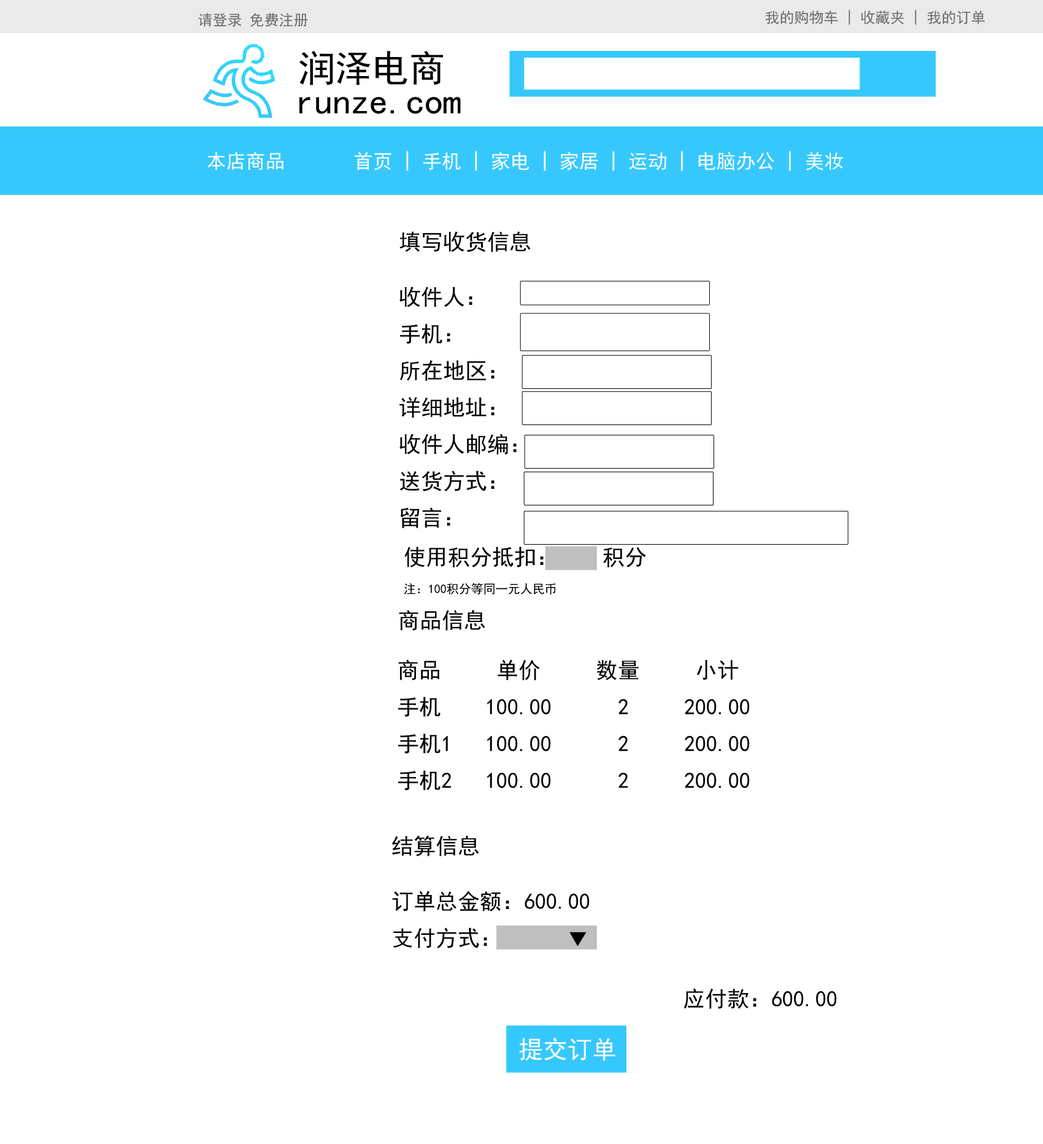
<style>
.page{position:relative;width:1043px;height:1144px;background:#ffffff}
.page>*{position:absolute;margin:0}
.t1{font:14.7px "SimHei";color:#6f6f6f}
.t2{font:36.8px "SimHei";color:#010101}
.t3{font:19.6px "SimHei";color:#ffffff}
.t4{font:22.1px/18.4px "SimHei";color:#000000}
.t5{font:12.3px/18.4px "SimHei";color:#000000}
.t6{font:22.1px "SimHei";color:#000000}
.t7{font:24.5px "SimHei";color:#ffffff}
</style>
<div class="page">
<p class="t1" style="left:198px;top:13px;width:110px;height:14px">请登录 免费注册</p>
<p class="t1" style="left:765px;top:10px;width:220px;height:15px">我的购物车 | 收藏夹 | 我的订单</p>
<p class="t2" style="left:299px;top:51px;width:144px;height:34px">润泽电商</p>
<p class="t2" style="left:299px;top:97px;width:162px;height:17px">runze.com</p>
<p class="t3" style="left:207px;top:151px;width:636px;height:20px">本店商品       首页 | 手机 | 家电 | 家居 | 运动 | 电脑办公 | 美妆</p>
<p class="t4" style="left:399px;top:231px;width:131px;height:297px">填写收货信息<br><br><br>收件人：<br><br>手机：<br><br>所在地区：<br><br>详细地址：<br><br>收件人邮编：<br><br>送货方式：<br><br>留言：</p>
<p class="t5" style="left:404px;top:546px;width:242px;height:48px"><span class="t4">使用积分抵扣：    积分<br><br></span>注：100积分等同一元人民币</p>
<p class="t6" style="left:399px;top:610px;width:86px;height:20px">商品信息</p>
<p class="t4" style="left:398px;top:659px;width:351px;height:132px">商品     单价     数量     小计 <br><br>手机    100.00      2     200.00<br><br>手机1   100.00      2     200.00<br><br>手机2   100.00      2     200.00</p>
<p class="t4" style="left:392px;top:835px;width:197px;height:113px">结算信息<br><br><br>订单总金额：600.00<br><br>支付方式：</p>
<p class="t6" style="left:569px;top:932px;width:17px;height:14px">▼</p>
<p class="t6" style="left:683px;top:988px;width:154px;height:21px">应付款：600.00</p>
<p class="t7" style="left:519px;top:1038px;width:96px;height:22px">提交订单</p>
</div>
